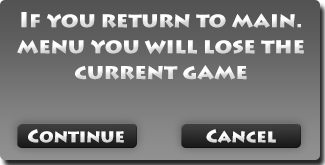
<style>
.page{position:relative;width:325px;height:165px}
.page>*{position:absolute;margin:0}
.t1{font:21.6px "LithosPro-Black";color:#eeeeee}
.t2{font:18px "LithosPro-Black";color:#efefef}
</style>
<div class="page">
<p class="t1" style="left:17px;top:12px;width:287px;height:68px;text-align:center">.If you return to main<br>menu you will lose the<br>current game</p>
<p class="t2" style="left:28px;top:129px;width:96px;height:14px">Continue</p>
<p class="t2" style="left:206px;top:129px;width:70px;height:14px">Cancel</p>
</div>
